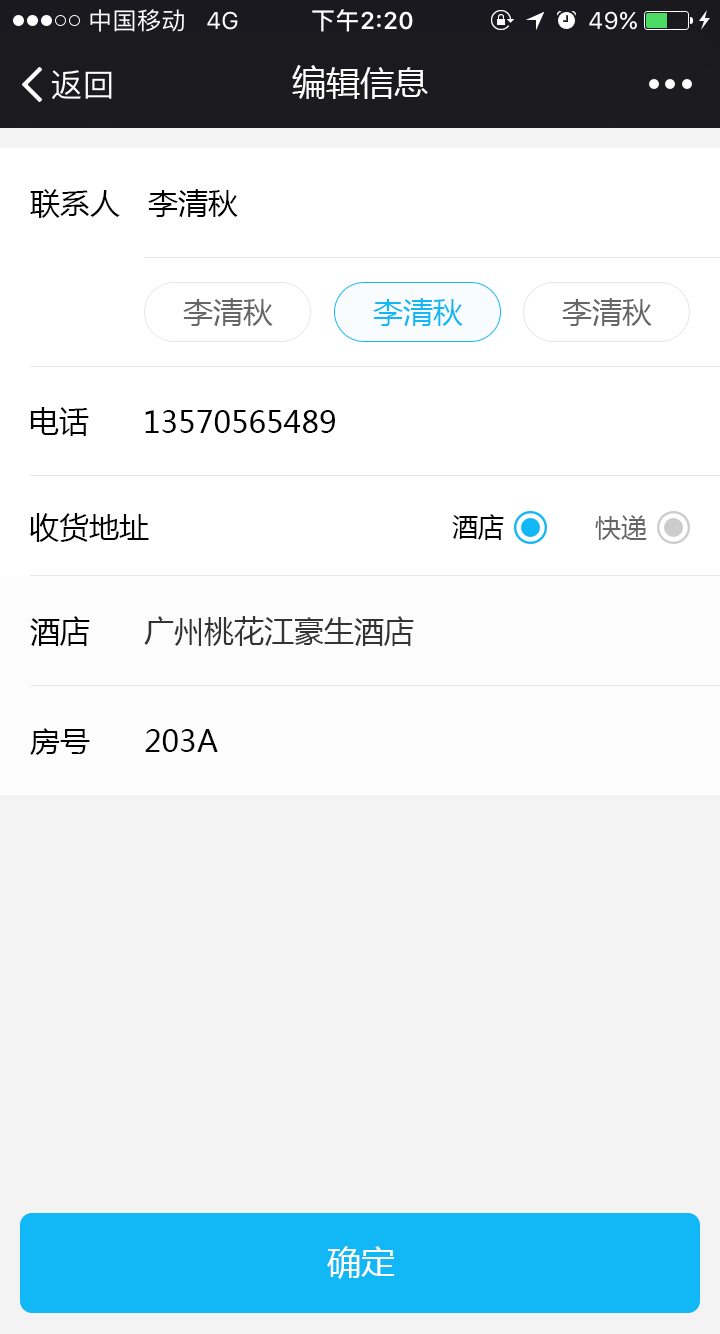
<style>
.page{position:relative;width:720px;height:1334px;background:#f3f3f3}
.page>*{position:absolute;margin:0}
.t1{font:34px "MicrosoftYaHei";color:#ffffff}
.t2{font:30px "MicrosoftYaHei";color:#000000}
.t3{font:30px "MicrosoftYaHei";color:#666666}
.t4{font:30px "MicrosoftYaHei";color:#12b7f5}
.t5{font:26px "MicrosoftYaHei";color:#000000}
.t6{font:26px "MicrosoftYaHei";color:#666666}
.t7{font:30px "MicrosoftYaHei";color:#333333}
</style>
<div class="page">
<p class="t1" style="left:292px;top:65px;width:136px;height:34px">编辑信息</p>
<p class="t2" style="left:30px;top:189px;width:90px;height:29px">联系人</p>
<p class="t2" style="left:148px;top:189px;width:90px;height:28px">李清秋</p>
<p class="t3" style="left:183px;top:298px;width:90px;height:28px">李清秋</p>
<p class="t4" style="left:373px;top:298px;width:90px;height:28px">李清秋</p>
<p class="t3" style="left:562px;top:298px;width:90px;height:28px">李清秋</p>
<p class="t2" style="left:30px;top:407px;width:59px;height:29px">电话</p>
<p class="t2" style="left:145px;top:410px;width:190px;height:23px">13570565489</p>
<p class="t2" style="left:30px;top:513px;width:119px;height:29px">收货地址</p>
<p class="t5" style="left:452px;top:514px;width:52px;height:26px">酒店</p>
<p class="t6" style="left:595px;top:515px;width:52px;height:25px">快递</p>
<p class="t2" style="left:30px;top:616px;width:60px;height:30px">酒店</p>
<p class="t7" style="left:144px;top:616px;width:270px;height:30px">广州桃花江豪生酒店</p>
<p class="t2" style="left:30px;top:728px;width:60px;height:27px">房号</p>
<p class="t2" style="left:145px;top:729px;width:73px;height:23px">203A</p>
<p class="t1" style="left:327px;top:1246px;width:68px;height:33px">确定</p>
</div>
